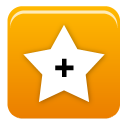
<style>
.page{position:relative;width:128px;height:128px;background:#ffffff}
.page>*{position:absolute;margin:0}
.t1{font:36px "Arial-BoldMT";color:#000000}
</style>
<div class="page">
<p class="t1" style="left:55px;top:58px;width:19px;height:19px">+</p>
</div>
